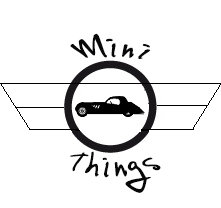
<style>
.page{position:relative;width:221px;height:208px;background:#ffffff}
.page>*{position:absolute;margin:0}
.t1{font:33.3px "VincHand";color:#080808}
</style>
<div class="page">
<p class="t1" style="left:70px;top:33px;width:81px;height:26px">Mini</p>
<p class="t1" style="left:70px;top:151px;width:91px;height:42px">Things</p>
</div>
